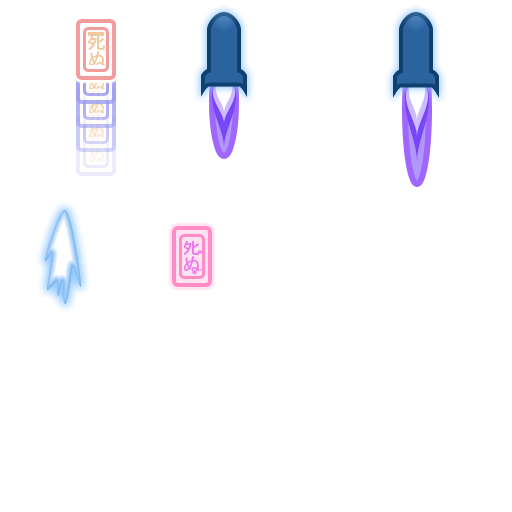
<style>
.page{position:relative;width:512px;height:512px;background:#ffffff}
.page>*{position:absolute;margin:0}
.t1{font:18px "KozGoPr6N-Medium";color:#f2c79c}
.t2{font:18px "KozGoPr6N-Medium"}
.t3{font:18px "KozGoPr6N-Medium";color:#ec7aec}
</style>
<div class="page">
<p class="t1" style="left:87px;top:32px;width:18px;height:33px;text-align:center">死ぬ</p>
<p class="t2" style="left:87px;top:80px;width:18px;height:33px;text-align:center">死ぬ</p>
<p class="t2" style="left:87px;top:104px;width:18px;height:33px;text-align:center">死ぬ</p>
<p class="t2" style="left:87px;top:128px;width:18px;height:34px;text-align:center">死ぬ</p>
<p class="t3" style="left:184px;top:241px;width:18px;height:33px;text-align:center">死ぬ</p>
</div>
